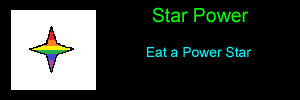
<style>
.page{position:relative;width:300px;height:100px;background:#000000}
.page>*{position:absolute;margin:0}
.t1{font:19.4px "ArialMT";color:#00ff00}
.t2{font:13.9px "ArialMT";color:#00ffff}
</style>
<div class="page">
<p class="t1" style="left:152px;top:7px;width:97px;height:16px">Star Power</p>
<p class="t2" style="left:147px;top:46px;width:105px;height:12px">Eat a Power Star</p>
</div>
